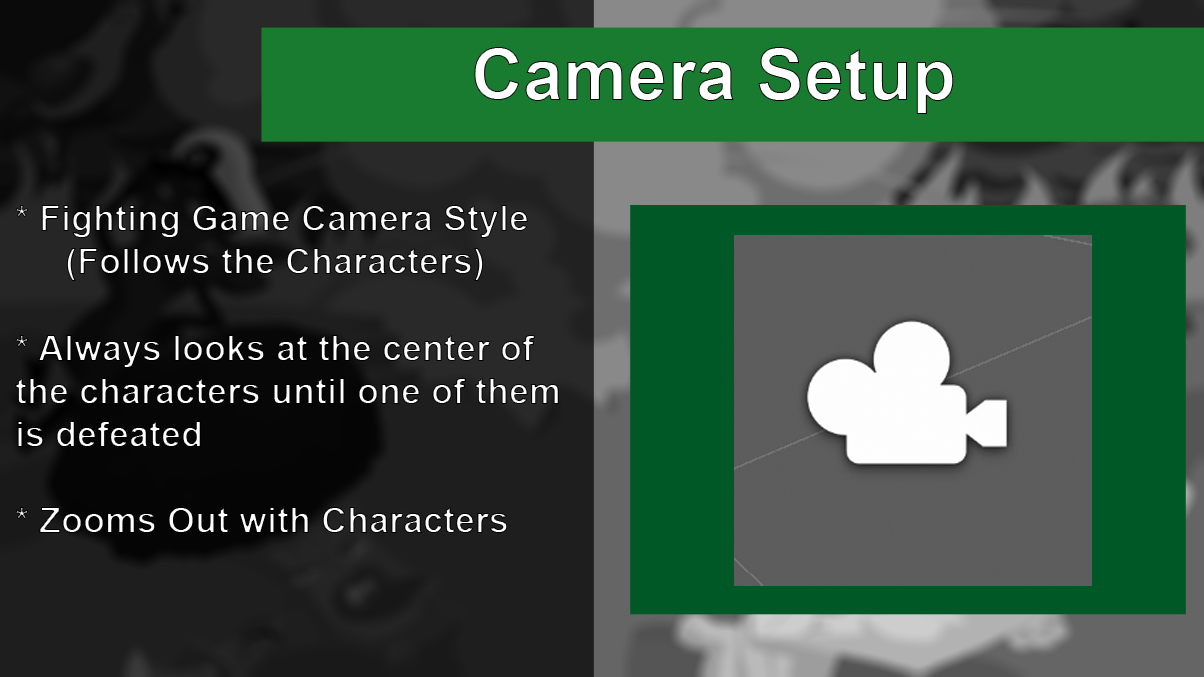
<style>
.page{position:relative;width:1204px;height:677px}
.page>*{position:absolute;margin:0}
.t1{font:72px "Arial-BoldMT";color:#ffffff}
.t2{font:36px "Arial-BoldMT"}
</style>
<div class="page">
<p class="t1" style="left:474px;top:47px;width:480px;height:67px">Camera Setup</p>
<p class="t2" style="left:15px;top:205px;width:544px;height:328px">* Fighting Game Camera Style <br>     (Follows the Characters)<br><br>* Always looks at the center of the characters until one of them is defeated <br><br>* Zooms Out with Characters</p>
</div>
